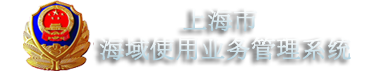
<style>
.page{position:relative;width:365px;height:71px;background:#ffffff}
.page>*{position:absolute;margin:0}
.t1{font:24px "MingLiU";letter-spacing:0.025em;font-weight:bold}
</style>
<div class="page">
<p class="t1" style="left:100px;top:37px;width:251px;height:24px">海域使用业务管理系统</p>
</div>
